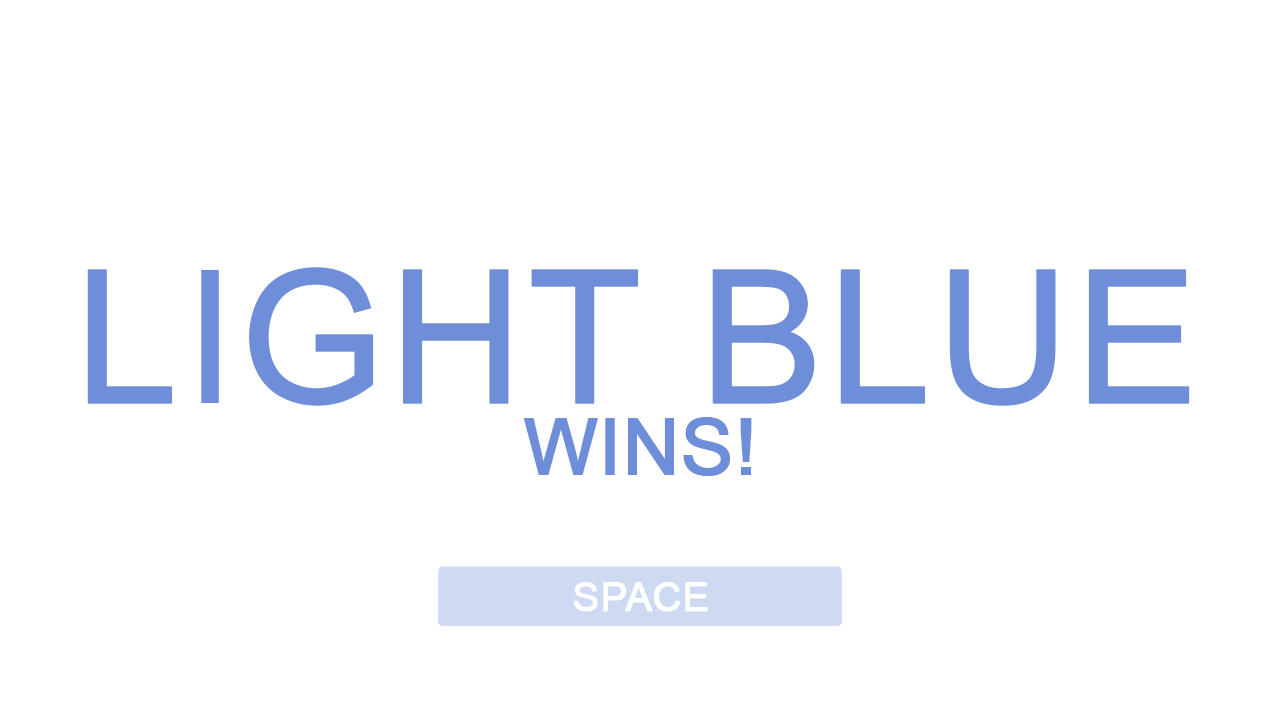
<style>
.page{position:relative;width:1280px;height:720px;background:#ffffff}
.page>*{position:absolute;margin:0}
.t1{font:185.4px "ArialMT";color:#6e8ed9;font-weight:bold}
.t2{font:77.9px "ArialMT";color:#6e8ed9;font-weight:bold}
</style>
<div class="page">
<p class="t1" style="left:87px;top:267px;width:1103px;height:139px">LIGHT BLUE</p>
<p class="t2" style="left:524px;top:417px;width:228px;height:59px">WINS!</p>
</div>
